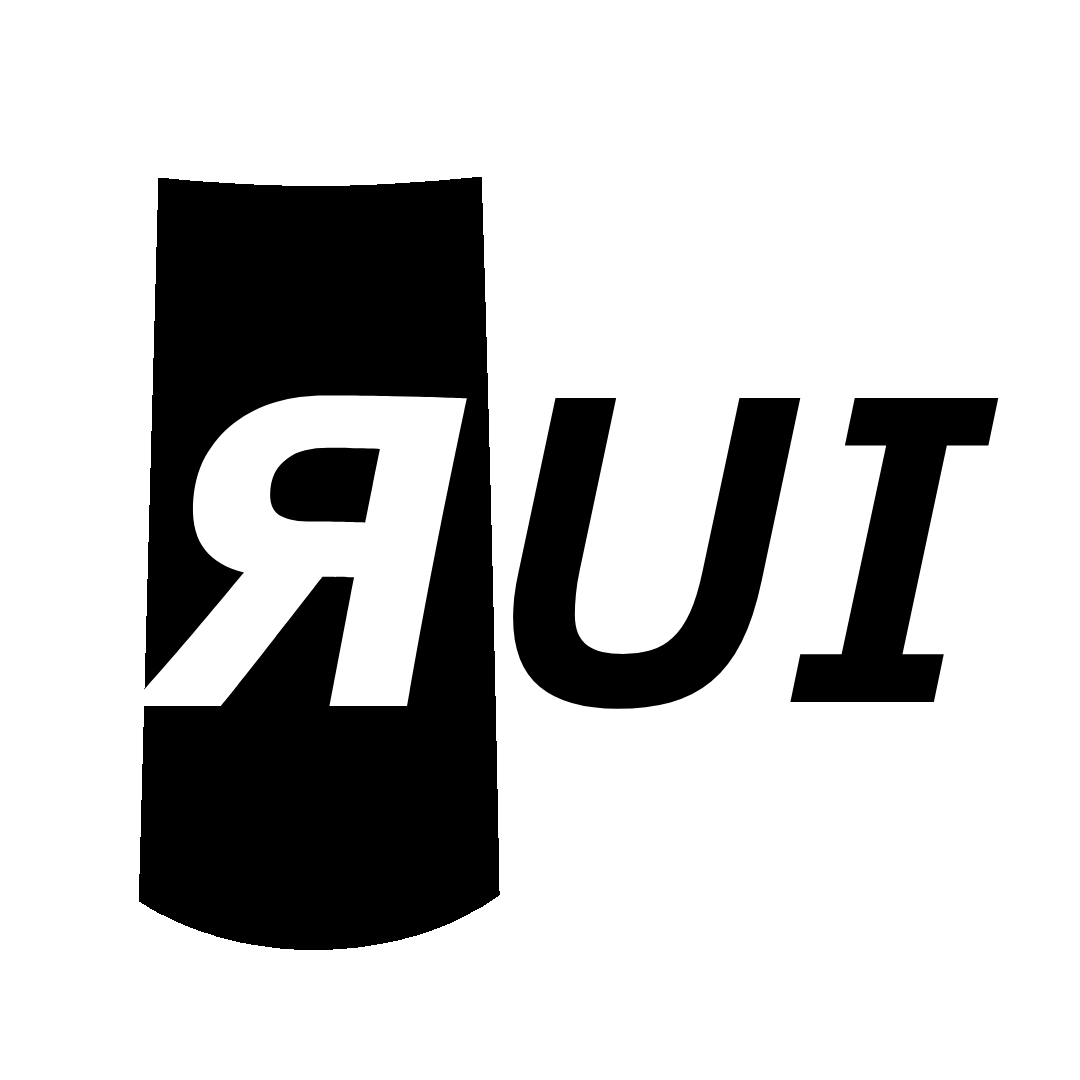
<style>
.page{position:relative;width:1080px;height:1080px;background:#ffffff}
.page>*{position:absolute;margin:0}
.t1{font:600px "ClearSans-BoldItalic";color:#000000}
.t2{font:450px "ClearSans-BoldItalic";color:#000000}
</style>
<div class="page">
<p class="t1" style="left:129px;top:176px;width:371px;height:774px">я</p>
<p class="t2" style="left:513px;top:397px;width:486px;height:312px">UI</p>
</div>
